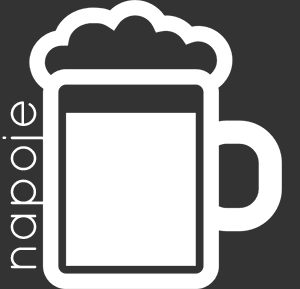
<style>
.page{position:relative;width:300px;height:289px;background:#333333}
.page>*{position:absolute;margin:0}
.t1{font:51.9px "Quicksand-Regular";color:#ffffff}
</style>
<div class="page">
<p class="t1" style="left:2px;top:101px;width:45px;height:168px;rotate:-90deg">napoje</p>
</div>
